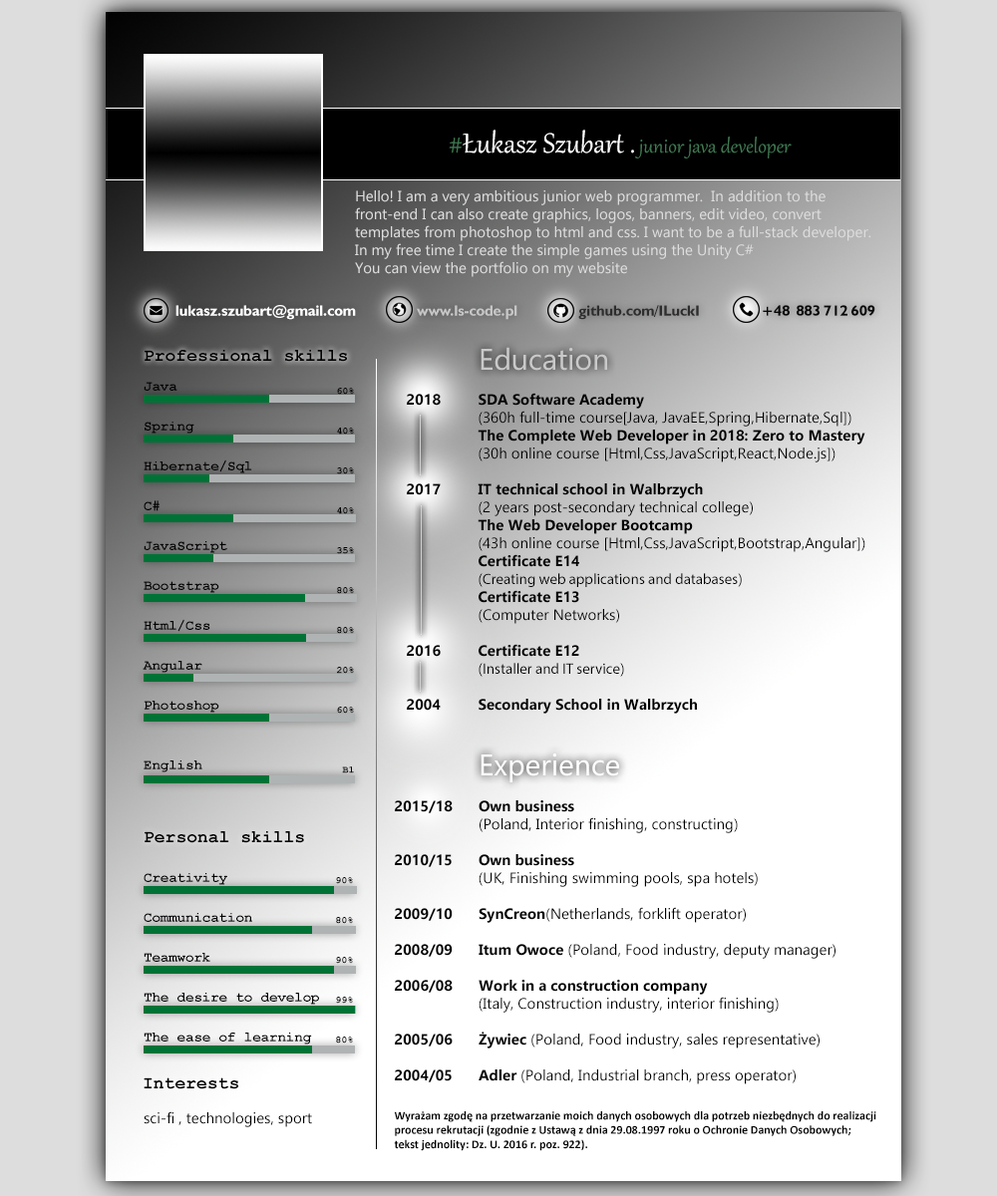
<style>
.page{position:relative;width:997px;height:1196px}
.page>*{position:absolute;margin:0}
.t1{font:33.9px "Gabriola";color:#ffffff}
.t2{font:33.9px "Gabriola";color:#407852}
.t3{font:23.9px "Gabriola";color:#407852}
.t4{font:15px "Gadugi";color:#dedddd}
.t5{font:17.9px "CourierNewPS-BoldMT";color:#000000}
.t6{font:29.9px "Gadugi";color:#c9c9c9}
.t7{font:14px/39.9px "CourierNewPS-BoldMT";color:#000000}
.t8{font:14px/19.9px "CourierNewPS-BoldMT";color:#000000}
.t9{font:10px/39.9px "CourierNewPS-BoldMT";color:#000000}
.t10{font:10px/29.9px "CourierNewPS-BoldMT";color:#000000}
.t11{font:15px "Gadugi";color:#000000}
.t12{font:15px "Gadugi-Bold";color:#000000}
.t13{font:15px "MyriadPro-Regular";color:#000000}
.t14{font:29.9px "Gadugi";color:#ffffff}
.t15{font:15px "MyriadPro-Bold";color:#000000}
.t16{font:12px "Calibri-Bold";color:#000000}
</style>
<div class="page">
<p class="t1" style="left:449px;top:130px;width:185px;height:24px"><span class="t2">#</span>Łukasz Szubart .</p>
<p class="t3" style="left:635px;top:137px;width:156px;height:21px">junior java developer</p>
<p class="t4" style="left:355px;top:190px;width:516px;height:87px">Hello! I am a very ambitious junior web programmer.  In addition to the front-end I can also create graphics, logos, banners, edit video, convert <br>templates from photoshop to html and css. I want to be a full-stack developer. In my free time I create the simple games using the Unity C# <br>You can view the portfolio on my website</p>
<p class="t5" style="left:145px;top:350px;width:202px;height:12px">Professional skills</p>
<p class="t6" style="left:480px;top:347px;width:127px;height:24px">Education</p>
<p class="t7" style="left:143px;top:382px;width:109px;height:391px">Java <br>Spring<br>Hibernate/Sql<br>C#<br>JavaScript<br>Bootstrap<br>Html/Css<br>Angular <br>Photoshop<br><br><span class="t8">English<br></span></p>
<p class="t9" style="left:337px;top:388px;width:17px;height:386px">60%<br>40%<br>30%<br>40%<br>35%<br>80%<br>80%<br>20%<br>60%<br><span class="t10"><br> B1</span></p>
<p class="t11" style="left:407px;top:393px;width:458px;height:321px"><span class="t12">2018  SDA Software Academy <br></span>  (360h full-time course[Java, JavaEE,Spring,Hibernate,Sql])<br>  <span class="t12">The Complete Web Developer in 2018: Zero to Mastery<br></span>  (30h online course [Html,Css,JavaScript,React,Node.js])<br><br><span class="t12">2017  IT technical school in Walbrzych<br>  </span>(2 years post-secondary technical college)<br><span class="t12">  The Web Developer Bootcamp<br></span>  (43h online course [Html,Css,JavaScript,Bootstrap,Angular])<br>  <span class="t12">Certificate E14 <br></span>  (<span class="t13">Creating web applications and databases</span>)<br>  <span class="t12">Certificate E13<br></span>  (Computer Networks)<br><span class="t12"><br>2016  Certificate E12<br></span>  (<span class="t13">Installer and IT service</span>)<br><br><span class="t12">2004  Secondary School in Walbrzych</span></p>
<p class="t14" style="left:480px;top:754px;width:139px;height:29px">Experience</p>
<p class="t11" style="left:395px;top:800px;width:440px;height:285px"><span class="t12">2015/18    Own business<br>     </span>(Poland, Interior finishing, constructing)<br><br><span class="t12">2010/15    Own business<br></span>     (UK, Finishing swimming pools, spa hotels)<br><br><span class="t12">2009/10    SynCreon</span>(Netherlands, forklift operator)<span class="t12"> <br><br>2008/09    Itum Owoce</span> (Poland, Food industry, deputy manager)<br><br><span class="t12">2006/08    Work in a construction company<br></span>     (Italy, Construction industry, interior finishing)<br><br><span class="t12">2005/06    </span><span class="t15">Ż</span><span class="t12">ywiec </span>(Poland, Food industry, sales representative)<br><br><span class="t12">2004/05    Adler </span>(Poland, Industrial branch, press operator)</p>
<p class="t5" style="left:145px;top:831px;width:159px;height:12px">Personal skills</p>
<p class="t7" style="left:144px;top:873px;width:175px;height:172px">Creativity<br>Communication<br>Teamwork<br>The desire to develop<br>The ease of learning</p>
<p class="t9" style="left:336px;top:877px;width:17px;height:167px">90%<br>80%<br>90%<br>99%<br>80%</p>
<p class="t5" style="left:144px;top:1078px;width:94px;height:12px">Interests</p>
<p class="t11" style="left:144px;top:1111px;width:168px;height:16px">sci-fi , technologies, sport</p>
<p class="t16" style="left:394px;top:1111px;width:482px;height:40px">Wyrażam zgodę na przetwarzanie moich danych osobowych dla potrzeb niezbędnych do realizacji procesu rekrutacji (zgodnie z Ustawą z dnia 29.08.1997 roku o Ochronie Danych Osobowych; tekst jednolity: Dz. U. 2016 r. poz. 922).</p>
</div>
